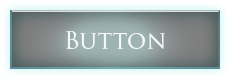
<style>
.page{position:relative;width:230px;height:79px}
.page>*{position:absolute;margin:0}
.t1{font:24px "TrajanPro3-Regular";color:#f1f1f1}
</style>
<div class="page">
<p class="t1" style="left:66px;top:31px;width:99px;height:18px">Button</p>
</div>
